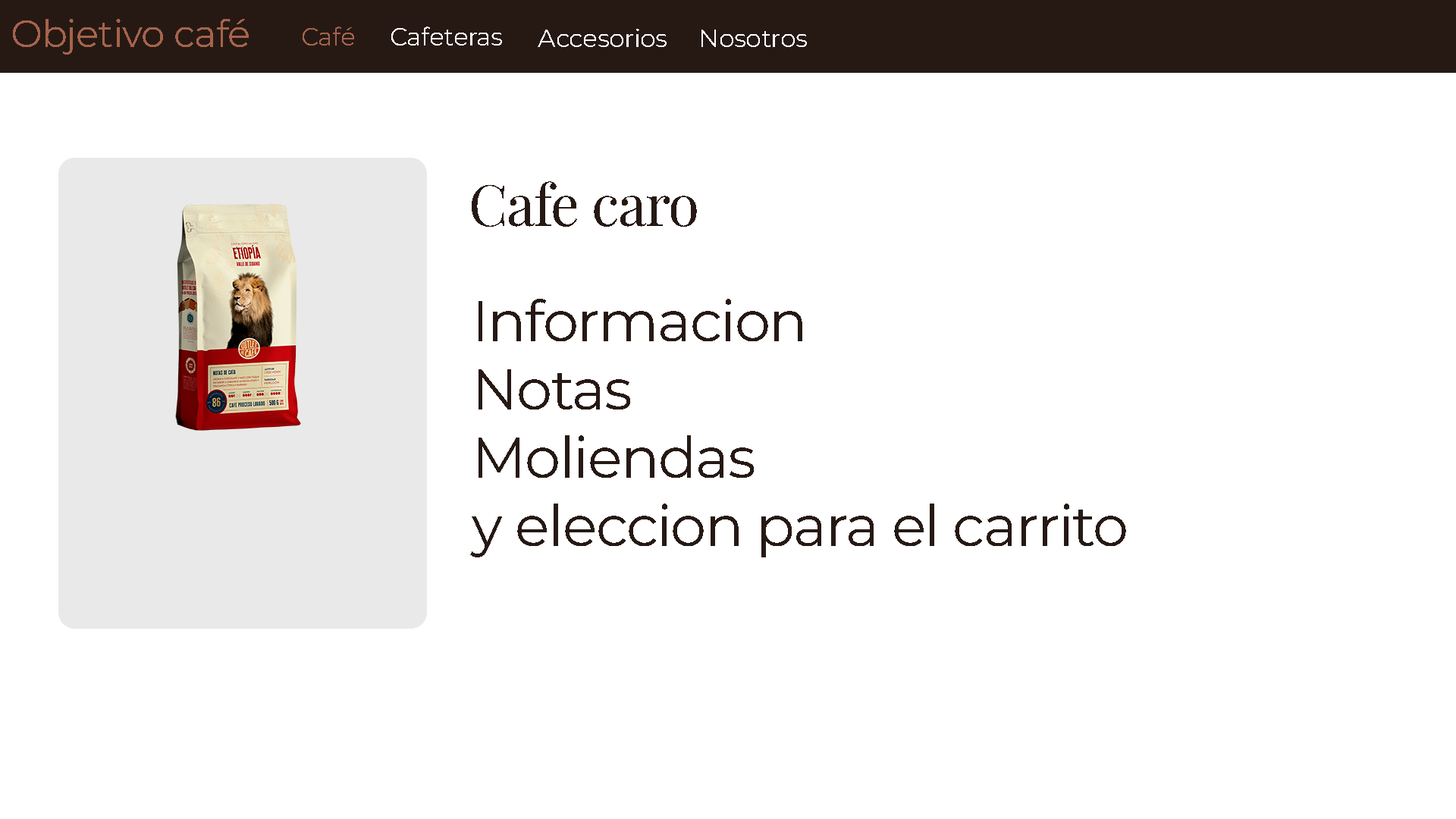
<style>
.page{position:relative;width:1456px;height:819px;background:#ffffff}
.page>*{position:absolute;margin:0}
.t1{font:37.9px "Montserrat-Regular";letter-spacing:-0.02em;color:#a6634b}
.t2{font:25.3px "Montserrat-Regular";letter-spacing:-0.02em;color:#a6634b}
.t3{font:25.3px "Montserrat-Regular";letter-spacing:-0.02em;color:#fefefe}
.t4{font:56.9px "PlayfairDisplay-Regular";letter-spacing:-0.02em;color:#261914}
.t5{font:56.9px "Montserrat-Regular";letter-spacing:-0.02em;color:#261914}
</style>
<div class="page">
<p class="t1" style="left:13px;top:19px;width:236px;height:36px">Objetivo café</p>
<p class="t2" style="left:303px;top:27px;width:51px;height:18px">Café</p>
<p class="t3" style="left:391px;top:27px;width:111px;height:18px">Cafeteras</p>
<p class="t3" style="left:538px;top:29px;width:129px;height:18px">Accesorios</p>
<p class="t3" style="left:701px;top:30px;width:106px;height:17px">Nosotros</p>
<p class="t4" style="left:472px;top:181px;width:225px;height:46px">Cafe caro</p>
<p class="t5" style="left:470px;top:299px;width:656px;height:258px">Informacion<br>Notas<br>Moliendas<br>y eleccion para el carrito</p>
</div>
